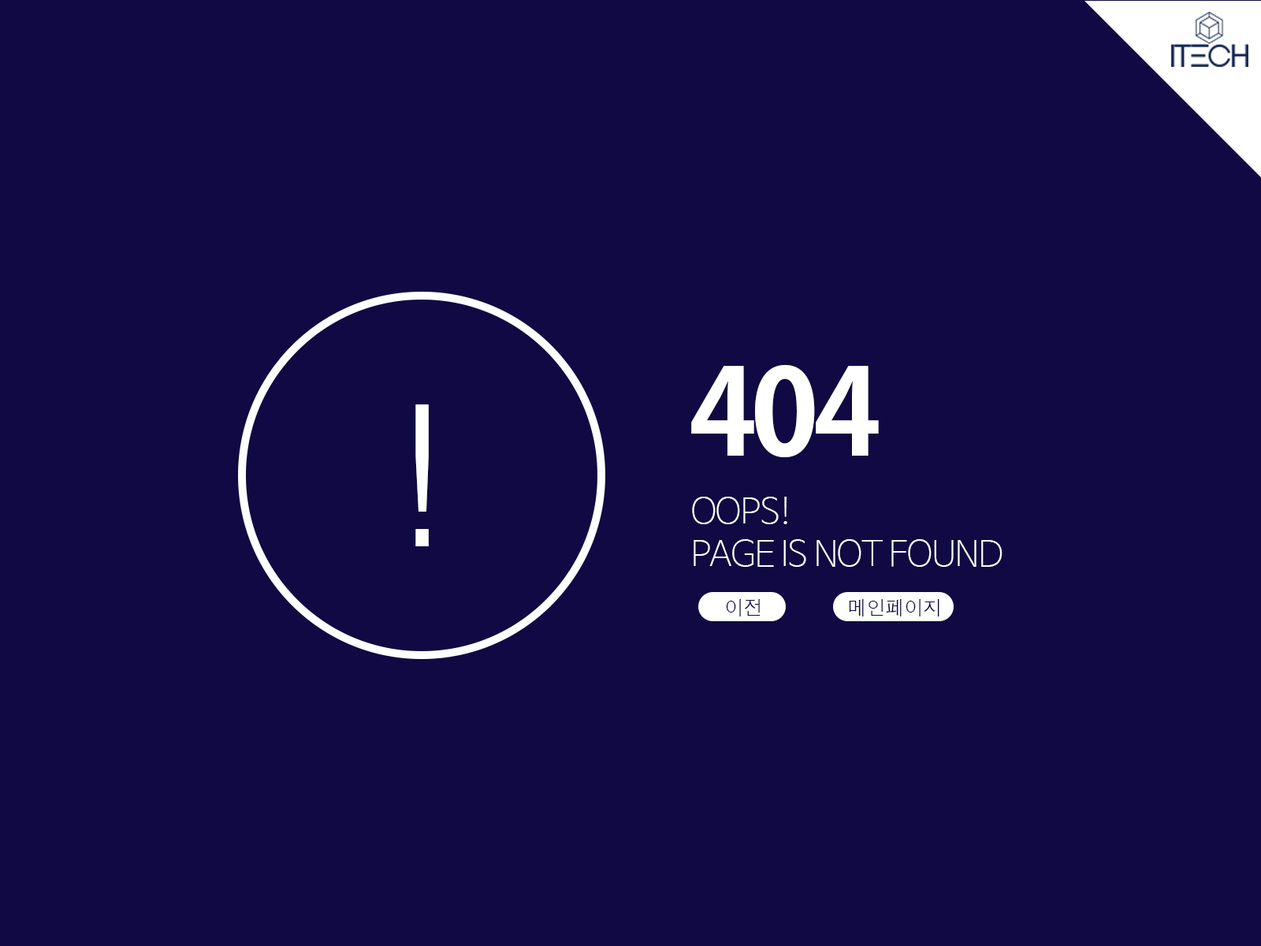
<style>
.page{position:relative;width:1261px;height:946px;background:#100943}
.page>*{position:absolute;margin:0}
.t1{font:118.2px "AdobeGothicStd-Bold";letter-spacing:-0.045em;color:#ffffff}
.t2{font:197px "Dotum";letter-spacing:-0.045em;color:#ffffff}
.t3{font:35.5px "NanumBarunGothicUltraLight";letter-spacing:-0.045em;color:#ffffff}
.t4{font:19.7px "Dotum";letter-spacing:-0.045em;color:#100943}
</style>
<div class="page">
<p class="t1" style="left:691px;top:365px;width:188px;height:92px">404</p>
<p class="t2" style="left:415px;top:404px;width:14px;height:142px">!</p>
<p class="t3" style="left:692px;top:496px;width:310px;height:71px">OOPS!<br>PAGE IS NOT FOUND</p>
<p class="t4" style="left:726px;top:599px;width:34px;height:17px">이전</p>
<p class="t4" style="left:849px;top:599px;width:90px;height:17px">메인페이지</p>
</div>
